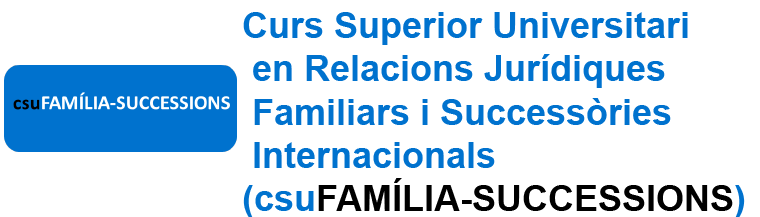
<style>
.page{position:relative;width:760px;height:217px;background:#ffffff}
.page>*{position:absolute;margin:0}
.t1{font:36px "Arial-BoldMT";color:#0072ce}
.t2{font:36px "Arial-BoldMT";color:#000000}
</style>
<div class="page">
<p class="t1" style="left:243px;top:12px;width:502px;height:206px">Curs Superior Universitari<br> en Relacions Jurídiques<br> Familiars i Successòries<br> Internacionals  <br>(csu<span class="t2">FAMÍLIA-SUCCESSIONS</span>)</p>
</div>
